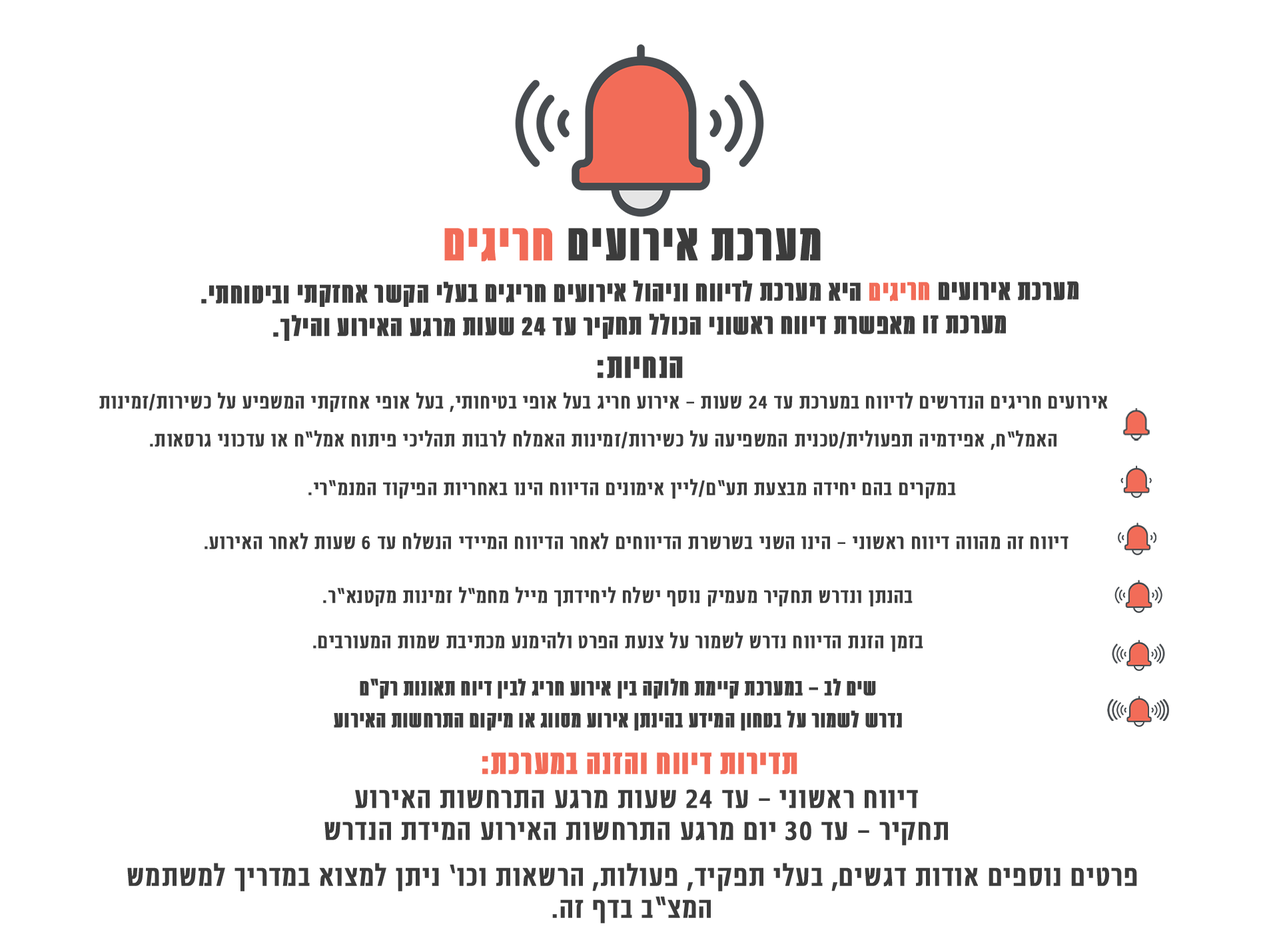
<style>
.page{position:relative;width:1279px;height:932px;background:#ffffff}
.page>*{position:absolute;margin:0}
.t1{font:59.9px "NarkisBlockConMFBold";letter-spacing:0.01em;color:#3c3c3c;font-weight:bold}
.t2{font:59.9px "NarkisBlockConMFBold";letter-spacing:0.01em;color:#f26c58;font-weight:bold}
.t3{font:33.3px/16.7px "NarkisBlockConMFBold";letter-spacing:0.01em;color:#3c3c3c;font-weight:bold}
.t4{font:33.3px/16.7px "NarkisBlockConMFBold";letter-spacing:0.01em;color:#f26c58;font-weight:bold}
.t5{font:40px "NarkisBlockConMFBold";letter-spacing:0.01em;color:#3c3c3c;font-weight:bold}
.t6{font:23.2px/38.2px "NarkisBlockConMF";letter-spacing:0.01em;color:#3c3c3c;font-weight:bold}
.t7{font:23.2px "NarkisBlockConMF";letter-spacing:0.01em;color:#3c3c3c;font-weight:bold}
.t8{font:26.6px/31.9px "NarkisBlockConMFBold";letter-spacing:0.01em;color:#3c3c3c;font-weight:bold}
.t9{font:40px "NarkisBlockConMFBold";letter-spacing:0.01em;color:#f26c58;font-weight:bold}
.t10{font:33.3px/32px "NarkisBlockConMF";letter-spacing:0.01em;color:#3c3c3c;font-weight:bold}
</style>
<div class="page">
<p class="t1" style="left:444px;top:228px;width:377px;height:34px">מערכת אירועים <span class="t2">חריגים</span></p>
<p class="t3" style="left:201px;top:280px;width:877px;height:61px;text-align:center">מערכת אירועים <span class="t4">חריגים </span>היא מערכת לדיווח וניהול אירועים חריגים בעלי הקשר אחזקתי וביטוחתי.<br><br>מערכת זו מאפשרת דיווח ראשוני הכולל תחקיר עד 24 שעות מרגע האירוע והילך.</p>
<p class="t5" style="left:597px;top:356px;width:86px;height:22px">הנחיות:</p>
<p class="t6" style="left:99px;top:392px;width:1009px;height:58px;text-align:center">אירועים חריגים הנדרשים לדיווח במערכת עד 24 שעות - אירוע חריג בעל אופי בטיחותי, בעל אופי אחזקתי המשפיע על כשירות/זמינות האמל”ח, אפידמיה תפעולית/טכנית המשפיעה על כשירות/זמינות האמלח לרבות תהליכי פיתוח אמל”ח או עדכוני גרסאות.</p>
<p class="t7" style="left:308px;top:479px;width:648px;height:20px">במקרים בהם יחידה מבצעת תע”ם/ליין אימונים הדיווח הינו באחריות הפיקוד המנמ”רי.</p>
<p class="t7" style="left:204px;top:533px;width:864px;height:16px">דיווח זה מהווה דיווח ראשוני - הינו השני בשרשרת הדיווחים לאחר הדיווח המיידי הנשלח עד 6 שעות לאחר האירוע.</p>
<p class="t7" style="left:323px;top:587px;width:589px;height:20px">בהנתן ונדרש תחקיר מעמיק נוסף ישלח ליחידתך מייל מחמ”ל זמינות מקטנא”ר.</p>
<p class="t7" style="left:313px;top:632px;width:610px;height:20px">בזמן הזנת הדיווח נדרש לשמור על צנעת הפרט ולהימנע מכתיבת שמות המעורבים.</p>
<p class="t8" style="left:334px;top:679px;width:568px;height:52px;text-align:center">שים לב - במערכת קיימת חלוקה בין אירוע חריג לבין דיוח תאונות רק”ם<br>נדרש לשמור על בטחון המידע בהינתן אירוע מסווג או מיקום התרחשות האירוע</p>
<p class="t9" style="left:482px;top:753px;width:315px;height:22px">תדירות דיווח והזנה במערכת:</p>
<p class="t10" style="left:324px;top:790px;width:624px;height:56px;text-align:center">דיווח ראשוני - עד 24 שעות מרגע התרחשות האירוע<br>תחקיר - עד 30 יום מרגע התרחשות האירוע המידת הנדרש</p>
<p class="t10" style="left:127px;top:863px;width:1010px;height:61px;text-align:center">פרטים נוספים אודות דגשים, בעלי תפקיד, פעולות, הרשאות וכו’ ניתן למצוא במדריך למשתמש<br>המצ”ב בדף זה.</p>
</div>
